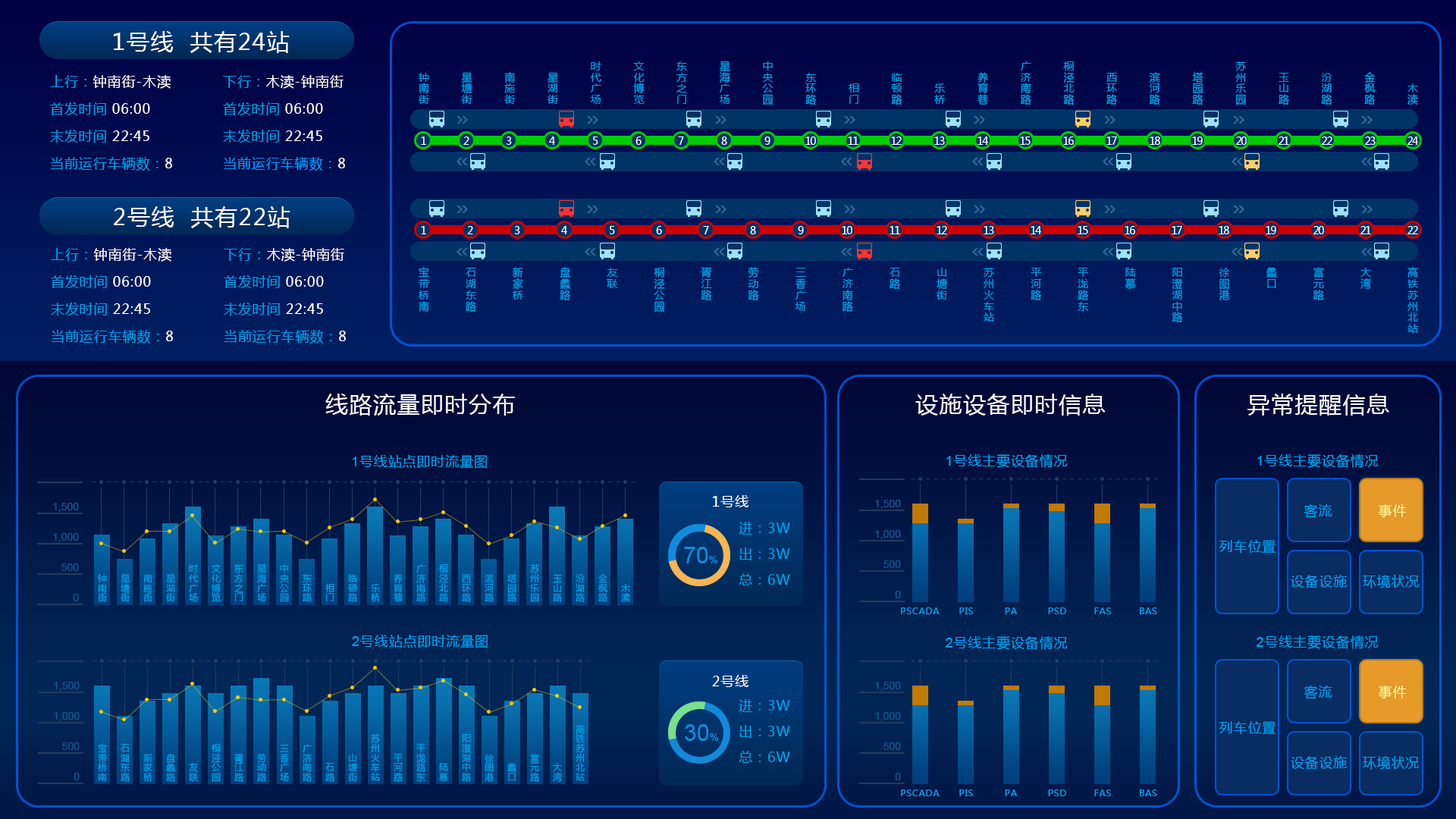
<style>
.page{position:relative;width:1456px;height:819px}
.page>*{position:absolute;margin:0}
.t1{font:22.7px "MicrosoftYaHei";letter-spacing:0.05em;color:#ffffff}
.t2{font:10.6px/43px "MicrosoftYaHei";letter-spacing:0.05em;color:#00a0e9}
.t3{font:13.6px/27.3px "MicrosoftYaHei";letter-spacing:0.05em;color:#00a0e9}
.t4{font:13.6px/27.3px "MicrosoftYaHei";letter-spacing:0.05em;color:#ffffff}
.t5{font:13.6px/27.3px "MicrosoftYaHei";letter-spacing:0.05em;color:#0099ff}
.t6{font:13.6px/27.3px "MicrosoftYaHei";letter-spacing:0.05em;color:#feffff}
.t7{font:10.6px "MicrosoftYaHei";letter-spacing:-0.1em;color:#ffffff}
.t8{font:10.6px/47.1px "MicrosoftYaHei";letter-spacing:0.05em;color:#00a0e9}
.t9{font:13.6px "MicrosoftYaHei";letter-spacing:0.05em;color:#00a1f2}
.t10{font:13.6px "ArialMT";letter-spacing:0.05em;color:#00a1f2}
.t11{font:13.6px "MicrosoftYaHei";letter-spacing:0.05em;color:#ffffff}
.t12{font:10.6px/30.3px "ArialMT";color:#19558f}
.t13{font:13.6px "MicrosoftYaHei";letter-spacing:0.05em;color:#ffff99}
.t14{font:13.6px/25.8px "MicrosoftYaHei";letter-spacing:0.05em;color:#00a0e9}
.t15{font:22.7px "ArialMT";color:#128bde}
.t16{font:10.6px "ArialMT";color:#128bde}
.t17{font:9.1px/22.7px "MicrosoftYaHei";letter-spacing:0.05em;color:#00a0e9}
.t18{font:9.1px "MicrosoftYaHei";letter-spacing:0.05em;color:#00a1f2}
</style>
<div class="page">
<p class="t1" style="left:114px;top:31px;width:60px;height:21px">1号线</p>
<p class="t1" style="left:190px;top:31px;width:100px;height:22px">共有24站</p>
<p class="t2" style="left:419px;top:61px;width:999px;height:44px;text-align:right">木渎<br>金枫路<br>汾湖路<br>玉山路<br>苏州乐园<br>塔园路<br>滨河路<br>西环路<br>桐泾北路<br>广济南路<br>养育巷<br>乐桥<br>临顿路<br>相门<br>东环路<br>中央公园<br>星海广场<br>东方之门<br>文化博览<br>时代广场<br>星湖街<br>南施街<br>星塘街<br>钟南街</p>
<p class="t3" style="left:50px;top:74px;width:122px;height:97px">上行：<span class="t4">钟南街-木渎<br></span>首发时间 <span class="t4">06:00<br></span>末发时间 <span class="t4">22:45<br></span>当前运行车辆数：<span class="t4">8</span></p>
<p class="t5" style="left:223px;top:75px;width:122px;height:96px"><span class="t3">下行：</span><span class="t6">木渎-钟南街<br></span><span class="t3">首发时间 </span><span class="t4">06:00<br></span><span class="t3">末发时间 </span><span class="t4">22:45<br></span>当前运行车辆数：<span class="t4">8</span></p>
<p class="t7" style="left:421px;top:136px;width:5px;height:9px">1</p>
<p class="t7" style="left:463px;top:136px;width:6px;height:9px">2</p>
<p class="t7" style="left:506px;top:136px;width:6px;height:9px">3</p>
<p class="t7" style="left:549px;top:136px;width:6px;height:9px">4</p>
<p class="t7" style="left:593px;top:136px;width:5px;height:9px">5</p>
<p class="t7" style="left:635px;top:136px;width:7px;height:9px">6</p>
<p class="t7" style="left:678px;top:136px;width:6px;height:9px">7</p>
<p class="t7" style="left:721px;top:136px;width:6px;height:9px">8</p>
<p class="t7" style="left:764px;top:136px;width:6px;height:9px">9</p>
<p class="t7" style="left:805px;top:136px;width:11px;height:9px">10</p>
<p class="t7" style="left:848px;top:136px;width:10px;height:9px">11</p>
<p class="t7" style="left:891px;top:136px;width:11px;height:9px">12</p>
<p class="t7" style="left:934px;top:136px;width:11px;height:9px">13</p>
<p class="t7" style="left:977px;top:136px;width:12px;height:9px">14</p>
<p class="t7" style="left:1020px;top:136px;width:11px;height:9px">15</p>
<p class="t7" style="left:1063px;top:136px;width:11px;height:9px">16</p>
<p class="t7" style="left:1106px;top:136px;width:11px;height:9px">17</p>
<p class="t7" style="left:1150px;top:136px;width:10px;height:9px">18</p>
<p class="t7" style="left:1192px;top:136px;width:11px;height:9px">19</p>
<p class="t7" style="left:1236px;top:136px;width:11px;height:9px">20</p>
<p class="t7" style="left:1279px;top:136px;width:10px;height:9px">21</p>
<p class="t7" style="left:1322px;top:136px;width:10px;height:9px">22</p>
<p class="t7" style="left:1365px;top:136px;width:11px;height:9px">23</p>
<p class="t7" style="left:1407px;top:136px;width:12px;height:9px">24</p>
<p class="t1" style="left:114px;top:206px;width:60px;height:21px">2号线</p>
<p class="t1" style="left:191px;top:206px;width:99px;height:22px">共有22站</p>
<p class="t7" style="left:421px;top:226px;width:5px;height:8px">1</p>
<p class="t7" style="left:467px;top:226px;width:6px;height:8px">2</p>
<p class="t7" style="left:514px;top:226px;width:6px;height:8px">3</p>
<p class="t7" style="left:561px;top:226px;width:6px;height:8px">4</p>
<p class="t7" style="left:610px;top:226px;width:5px;height:8px">5</p>
<p class="t7" style="left:656px;top:226px;width:6px;height:8px">6</p>
<p class="t7" style="left:703px;top:226px;width:6px;height:8px">7</p>
<p class="t7" style="left:750px;top:226px;width:6px;height:8px">8</p>
<p class="t7" style="left:798px;top:226px;width:6px;height:8px">9</p>
<p class="t7" style="left:842px;top:226px;width:10px;height:8px">10</p>
<p class="t7" style="left:890px;top:226px;width:10px;height:8px">11</p>
<p class="t7" style="left:937px;top:226px;width:10px;height:8px">12</p>
<p class="t7" style="left:984px;top:226px;width:10px;height:8px">13</p>
<p class="t7" style="left:1031px;top:226px;width:11px;height:8px">14</p>
<p class="t7" style="left:1078px;top:226px;width:10px;height:8px">15</p>
<p class="t7" style="left:1125px;top:226px;width:10px;height:8px">16</p>
<p class="t7" style="left:1172px;top:226px;width:10px;height:8px">17</p>
<p class="t7" style="left:1219px;top:226px;width:10px;height:8px">18</p>
<p class="t7" style="left:1266px;top:226px;width:10px;height:8px">19</p>
<p class="t7" style="left:1313px;top:226px;width:11px;height:8px">20</p>
<p class="t7" style="left:1360px;top:226px;width:11px;height:8px">21</p>
<p class="t7" style="left:1407px;top:226px;width:11px;height:8px">22</p>
<p class="t3" style="left:51px;top:247px;width:122px;height:97px">上行：<span class="t4">钟南街-木渎<br></span>首发时间 <span class="t4">06:00<br></span>末发时间 <span class="t4">22:45<br></span>当前运行车辆数：<span class="t4">8</span></p>
<p class="t3" style="left:224px;top:248px;width:122px;height:96px">下行：<span class="t4">木渎-钟南街<br></span>首发时间 <span class="t4">06:00<br></span>末发时间 <span class="t4">22:45<br></span>当前运行车辆数：<span class="t4">8</span></p>
<p class="t8" style="left:419px;top:267px;width:999px;height:66px">高铁苏州北站<br>大湾<br>富元路<br>蠡口<br>徐图港<br>阳澄湖中路<br>陆慕<br>平泷路东<br>平河路<br>苏州火车站<br>山塘街<br>石路<br>广济南路<br>三香广场<br>劳动路<br>胥江路<br>桐泾公园<br>友联<br>盘蠡路<br>新家桥<br>石湖东路<br>宝带桥南</p>
<p class="t1" style="left:325px;top:394px;width:190px;height:22px">线路流量即时分布</p>
<p class="t1" style="left:915px;top:394px;width:191px;height:22px">设施设备即时信息</p>
<p class="t1" style="left:1247px;top:394px;width:142px;height:22px">异常提醒信息</p>
<p class="t9" style="left:352px;top:455px;width:135px;height:14px"><span class="t10">1</span>号线站点即时流量图</p>
<p class="t9" style="left:946px;top:454px;width:122px;height:14px"><span class="t10">1</span>号线主要设备情况</p>
<p class="t9" style="left:1257px;top:454px;width:122px;height:14px"><span class="t10">1</span>号线主要设备情况</p>
<p class="t11" style="left:713px;top:495px;width:35px;height:12px">1号线</p>
<p class="t12" style="left:53px;top:503px;width:26px;height:98px;text-align:right">1,500<br>1,000<br>500<br>0</p>
<p class="t12" style="left:875px;top:500px;width:26px;height:98px;text-align:right">1,500<br>1,000<br>500<br>0</p>
<p class="t9" style="left:1304px;top:504px;width:28px;height:14px">客流</p>
<p class="t13" style="left:1379px;top:504px;width:28px;height:14px">事件</p>
<p class="t14" style="left:739px;top:522px;width:51px;height:63px;text-align:center">进：3W<br>出：3W<br>总：6W</p>
<p class="t9" style="left:1219px;top:540px;width:56px;height:13px">列车位置</p>
<p class="t15" style="left:684px;top:547px;width:34px;height:16px">70<span class="t16">%</span></p>
<p class="t17" style="left:98px;top:563px;width:532px;height:39px;text-align:right">木渎<br>金枫路<br>汾湖路<br>玉山路<br>苏州乐园<br>塔园路<br>滨河路<br>西环路<br>桐泾北路<br>广济南路<br>养育巷<br>乐桥<br>临顿路<br>相门<br>东环路<br>中央公园<br>星海广场<br>东方之门<br>文化博览<br>时代广场<br>星湖街<br>南施街<br>星塘街<br>钟南街</p>
<p class="t9" style="left:1291px;top:575px;width:56px;height:13px">设备设施</p>
<p class="t9" style="left:1363px;top:575px;width:56px;height:13px">环境状况</p>
<p class="t18" style="left:901px;top:607px;width:39px;height:7px">PSCADA</p>
<p class="t18" style="left:959px;top:607px;width:14px;height:7px">PIS</p>
<p class="t18" style="left:1005px;top:607px;width:13px;height:7px">PA</p>
<p class="t18" style="left:1048px;top:607px;width:18px;height:7px">PSD</p>
<p class="t18" style="left:1094px;top:607px;width:17px;height:7px">FAS</p>
<p class="t18" style="left:1140px;top:607px;width:17px;height:7px">BAS</p>
<p class="t9" style="left:352px;top:635px;width:136px;height:13px"><span class="t10">2</span>号线站点即时流量图</p>
<p class="t9" style="left:946px;top:636px;width:122px;height:14px"><span class="t10">2</span>号线主要设备情况</p>
<p class="t9" style="left:1257px;top:635px;width:122px;height:14px"><span class="t10">2</span>号线主要设备情况</p>
<p class="t11" style="left:712px;top:675px;width:36px;height:12px">2号线</p>
<p class="t12" style="left:54px;top:682px;width:26px;height:98px;text-align:right">1,500<br>1,000<br>500<br>0</p>
<p class="t12" style="left:875px;top:682px;width:26px;height:98px;text-align:right">1,500<br>1,000<br>500<br>0</p>
<p class="t9" style="left:1304px;top:685px;width:28px;height:14px">客流</p>
<p class="t13" style="left:1379px;top:686px;width:28px;height:13px">事件</p>
<p class="t14" style="left:739px;top:699px;width:51px;height:64px;text-align:center">进：3W<br>出：3W<br>总：6W</p>
<p class="t17" style="left:98px;top:724px;width:487px;height:58px;text-align:right">高铁苏州北站<br>大湾<br>富元路<br>蠡口<br>徐图港<br>阳澄湖中路<br>陆慕<br>平泷路东<br>平河路<br>苏州火车站<br>山塘街<br>石路<br>广济南路<br>三香广场<br>劳动路<br>胥江路<br>桐泾公园<br>友联<br>盘蠡路<br>新家桥<br>石湖东路<br>宝带桥南</p>
<p class="t15" style="left:685px;top:724px;width:34px;height:17px">30<span class="t16">%</span></p>
<p class="t9" style="left:1219px;top:721px;width:56px;height:13px">列车位置</p>
<p class="t9" style="left:1291px;top:756px;width:56px;height:14px">设备设施</p>
<p class="t9" style="left:1363px;top:756px;width:56px;height:14px">环境状况</p>
<p class="t18" style="left:901px;top:789px;width:39px;height:7px">PSCADA</p>
<p class="t18" style="left:959px;top:789px;width:14px;height:7px">PIS</p>
<p class="t18" style="left:1005px;top:789px;width:13px;height:7px">PA</p>
<p class="t18" style="left:1048px;top:789px;width:18px;height:7px">PSD</p>
<p class="t18" style="left:1094px;top:789px;width:17px;height:7px">FAS</p>
<p class="t18" style="left:1140px;top:789px;width:17px;height:7px">BAS</p>
</div>
